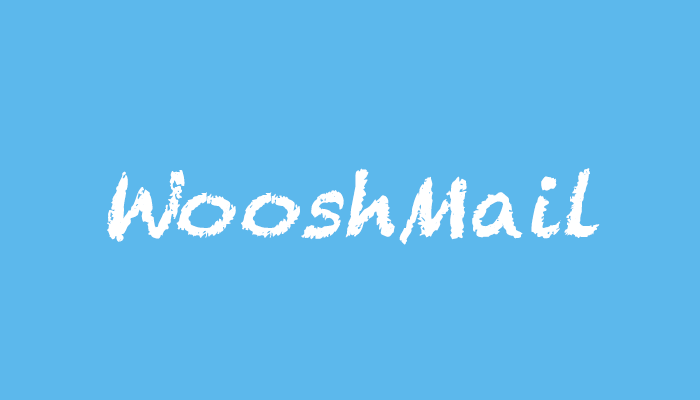
<style>
.page{position:relative;width:700px;height:400px;background:#5cb8ec}
.page>*{position:absolute;margin:0}
.t1{font:85px "Chalkduster";color:#ffffff;font-style:italic}
</style>
<div class="page">
<p class="t1" style="left:107px;top:168px;width:493px;height:77px">WooshMail</p>
</div>
